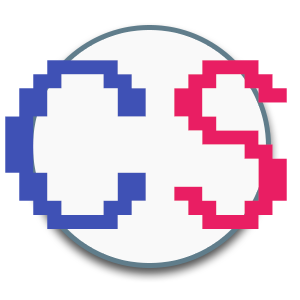
<style>
.page{position:relative;width:300px;height:300px;background:#ffffff}
.page>*{position:absolute;margin:0}
.t1{font:225px "System";color:#3f51b5}
.t2{font:225px "System";color:#e91e63}
</style>
<div class="page">
<p class="t1" style="left:5px;top:60px;width:282px;height:169px">C<span class="t2">S</span></p>
</div>
